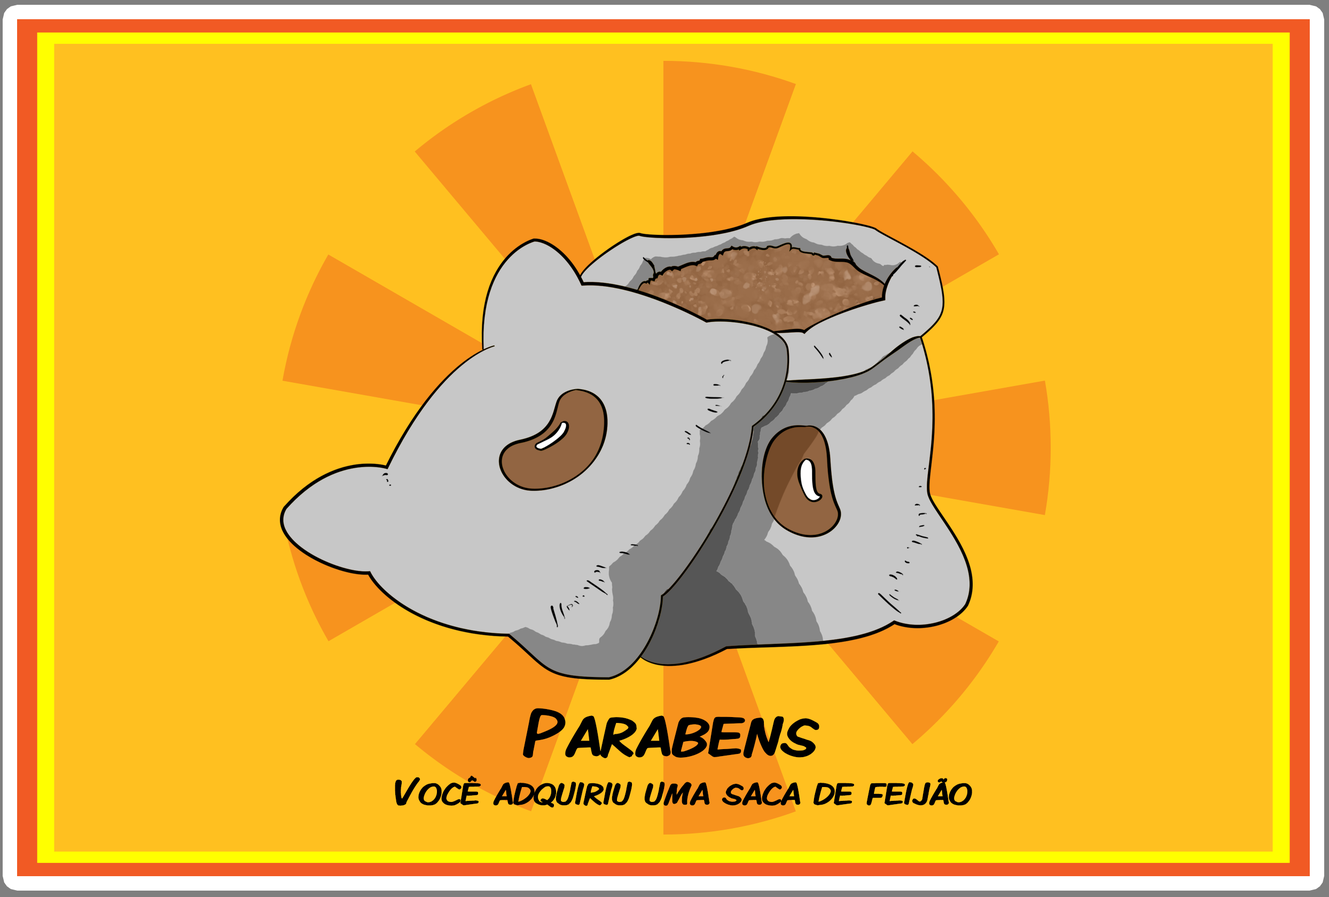
<style>
.page{position:relative;width:1329px;height:897px;background:#ffc020}
.page>*{position:absolute;margin:0}
.t1{font:38.5px/49.1px "KomikaDisplayKaps";color:#000000}
.t2{font:69.4px/49.1px "KomikaDisplayKaps";color:#000000}
</style>
<div class="page">
<p class="t1" style="left:395px;top:708px;width:577px;height:100px;text-align:center"><span class="t2">Parabens <br></span>Você adquiriu uma saca de feijão</p>
</div>
